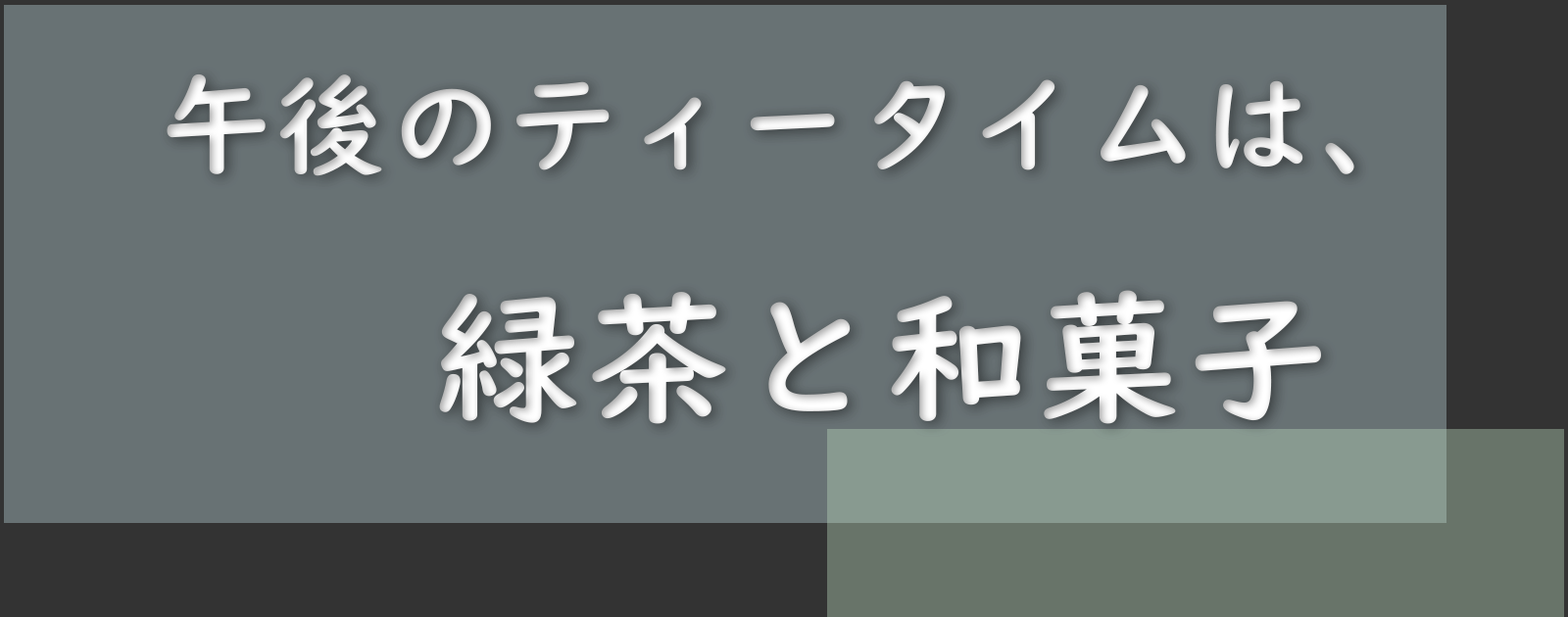
<style>
.page{position:relative;width:1568px;height:617px;background:#687274}
.page>*{position:absolute;margin:0}
.t1{font:110.2px "UDDigiKyokashoNP-B";letter-spacing:0.05em;color:#ebebeb}
.t2{font:142.9px "UDDigiKyokashoNP-B";letter-spacing:0.05em;color:#ffffff}
</style>
<div class="page">
<p class="t1" style="left:167px;top:74px;width:1187px;height:102px">午後のティータイムは、</p>
<p class="t2" style="left:439px;top:290px;width:882px;height:134px">緑茶と和菓子</p>
</div>
